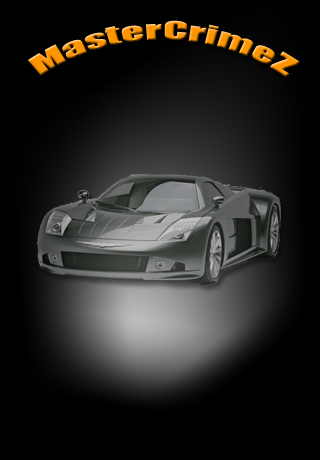
<style>
.page{position:relative;width:320px;height:460px;background:#000000}
.page>*{position:absolute;margin:0}
.t1{font:24px "Impact";scale:1.14 1}
</style>
<div class="page">
<p class="t1" style="left:28px;top:20px;width:272px;height:57px;text-align:center">MasterCrimeZ</p>
</div>
